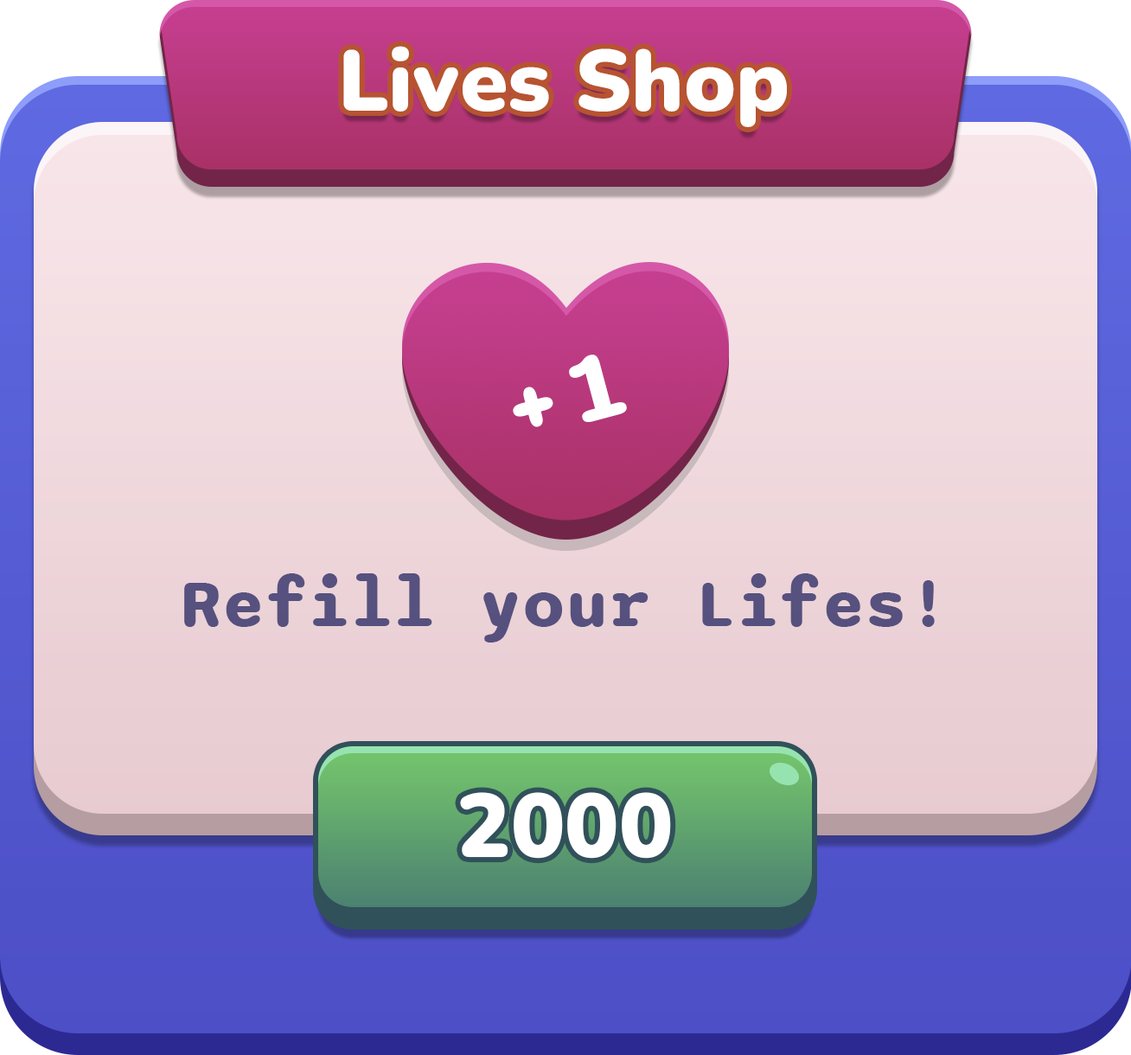
<style>
.page{position:relative;width:1131px;height:1055px}
.page>*{position:absolute;margin:0}
.t1{font:86.4px "Nunito-Black";color:#ffffff}
.t2{font:103.7px "Sono-Bold";color:#ffffff}
.t3{font:69.2px "Sono-Bold";color:#56517e}
.t4{font:89.9px "Nunito-Black";color:#ffffff}
</style>
<div class="page">
<p class="t1" style="left:343px;top:46px;width:444px;height:81px">Lives Shop</p>
<p class="t2" style="left:513px;top:354px;width:114px;height:73px;rotate:-15deg">+1</p>
<p class="t3" style="left:184px;top:573px;width:750px;height:69px">Refill your Lifes!</p>
<p class="t4" style="left:460px;top:792px;width:211px;height:66px">2000</p>
</div>
